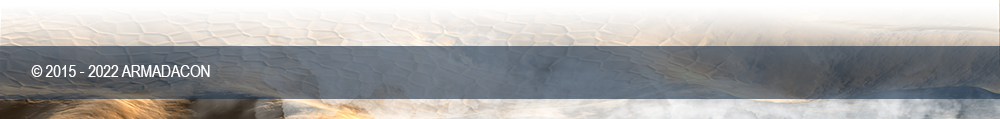
<style>
.page{position:relative;width:1000px;height:119px}
.page>*{position:absolute;margin:0}
.t1{font:16.7px "ArialNarrow";color:#ffffff;font-variant:small-caps}
</style>
<div class="page">
<p class="t1" style="left:31px;top:65px;width:179px;height:12px">© 2015 - 2022 ARMADACON</p>
</div>
